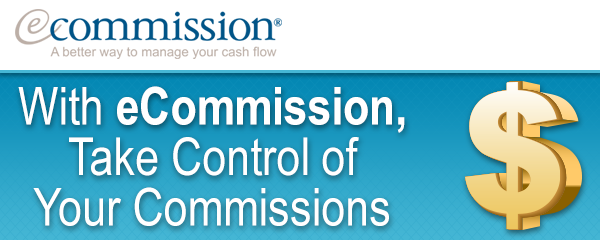
<style>
.page{position:relative;width:600px;height:240px;background:#ffffff}
.page>*{position:absolute;margin:0}
.t1{font:52.2px/50.5px "ArialNarrow";color:#ffffff}
.t2{font:52.2px/50.5px "ArialNarrow-Bold";color:#ffffff}
</style>
<div class="page">
<p class="t1" style="left:18px;top:86px;width:387px;height:140px;text-align:center">With<span class="t2"> eCommission,<br></span>Take Control of<br>Your Commissions</p>
</div>
